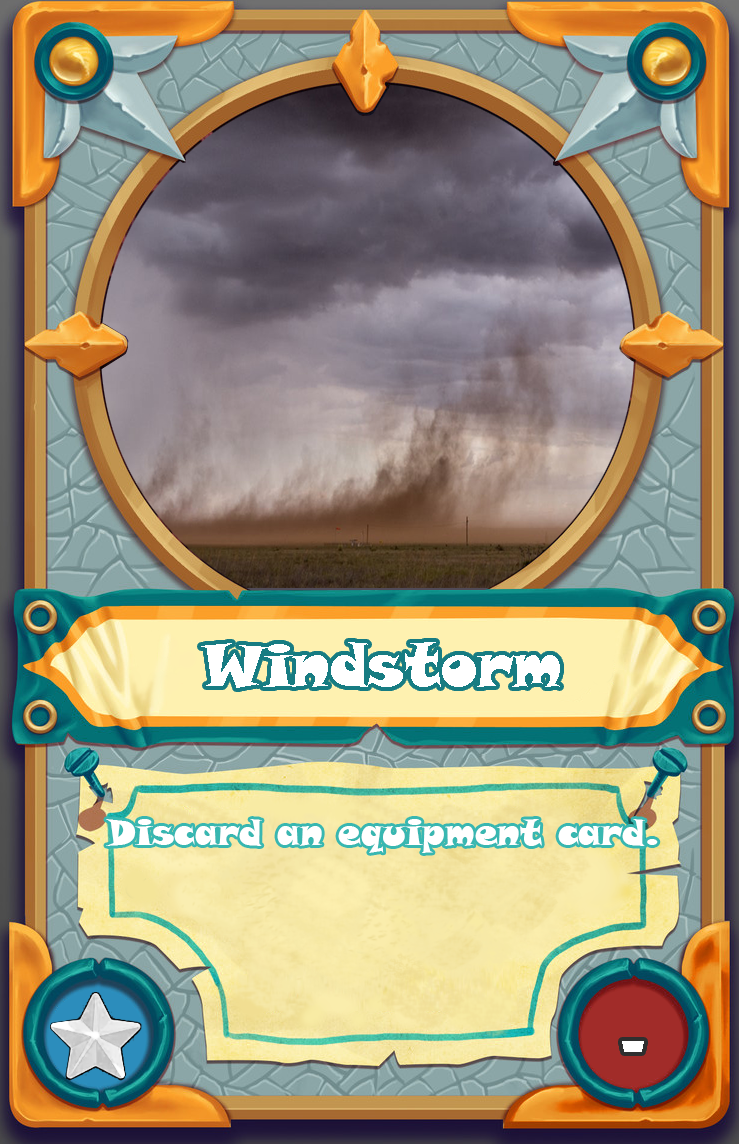
<style>
.page{position:relative;width:739px;height:1144px}
.page>*{position:absolute;margin:0}
.t1{font:60px "SnapITC-Regular";color:#ffffff}
.t2{font:36px "SnapITC-Regular";color:#ffffff}
.t3{font:72px "ShowcardGothic-Reg";color:#ffffff}
</style>
<div class="page">
<p class="t1" style="left:201px;top:642px;width:359px;height:46px">Windstorm</p>
<p class="t2" style="left:106px;top:819px;width:552px;height:34px">Discard an equipment card.</p>
<p class="t3" style="left:622px;top:1041px;width:22px;height:11px">-</p>
</div>
